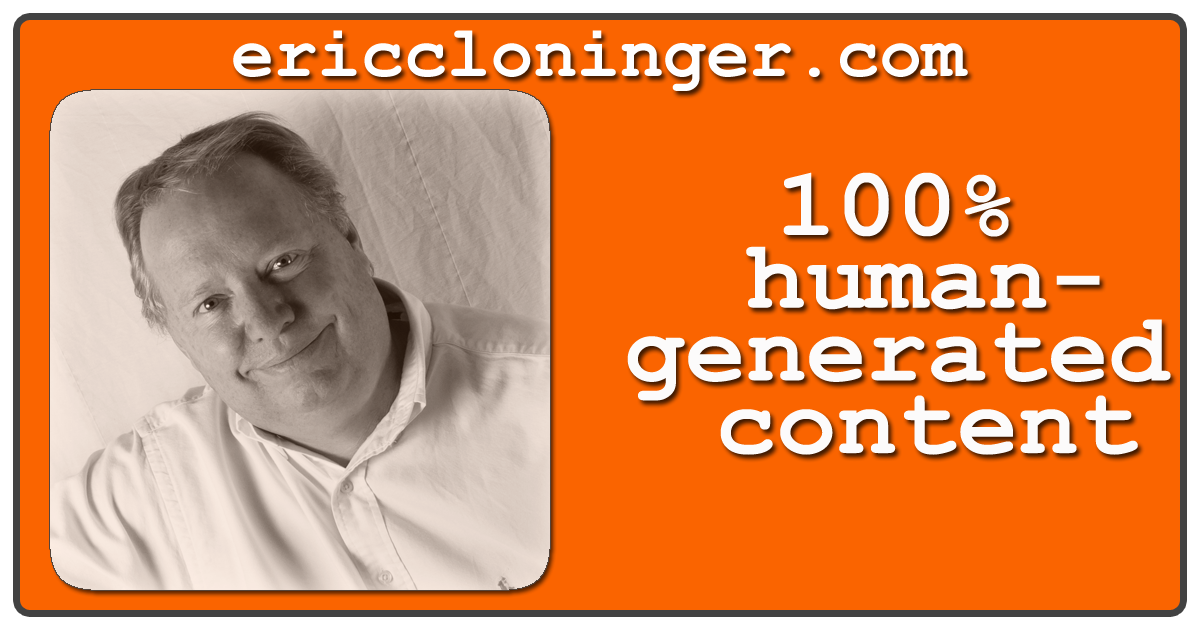
<style>
.page{position:relative;width:1200px;height:630px;background:#fa6400}
.page>*{position:absolute;margin:0}
.t1{font:72px "CourierNewPS-BoldMT";color:#fefefe}
.t2{font:96px/30px "CourierNewPS-BoldMT";color:#fcfbfb;scale:1.05 1}
</style>
<div class="page">
<p class="t1" style="left:233px;top:30px;width:735px;height:61px">ericcloninger.com</p>
<p class="t2" style="left:627px;top:172px;width:544px;height:283px;text-align:center">100% <br>human-<br>generated <br>content</p>
</div>
